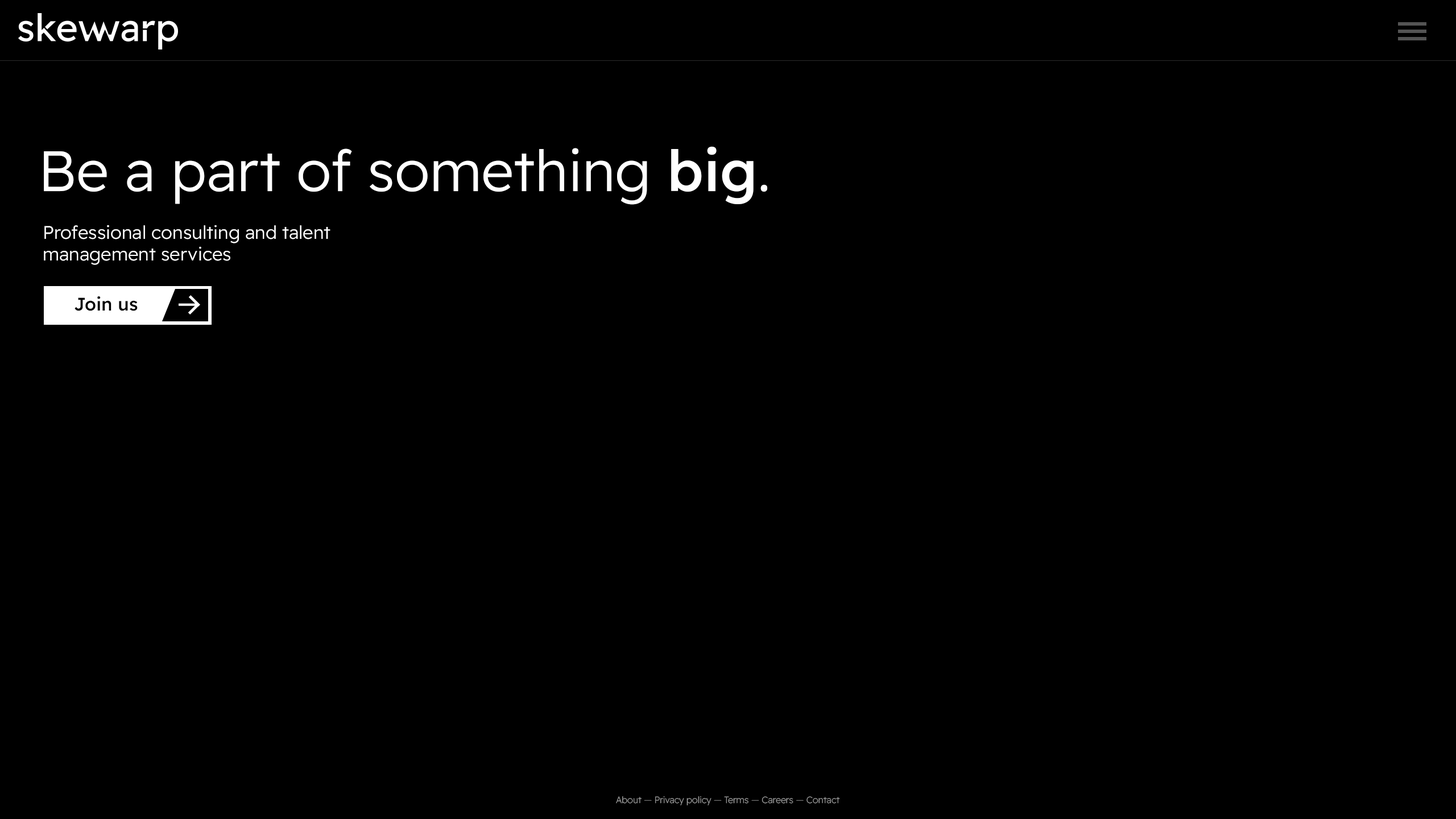
<style>
.page{position:relative;width:1456px;height:819px;background:#000000}
.page>*{position:absolute;margin:0}
.t1{font:56.9px "ReadexPro-Light";color:#ffffff}
.t2{font:56.9px "ReadexPro-Medium";color:#ffffff}
.t3{font:18.2px "ReadexPro-Light";color:#ffffff}
.t4{font:18.2px "ReadexPro-Medium";color:#000000}
.t5{font:9.1px "ReadexPro-ExtraLight";color:#9d9d9d}
.t6{font:9.1px "ReadexPro-ExtraLight";color:#717171}
.t7{font:9.1px "ReadexPro-ExtraLight";color:#727272}
</style>
<div class="page">
<p class="t1" style="left:44px;top:146px;width:724px;height:59px">Be a part of something <span class="t2">big</span>.</p>
<p class="t3" style="left:44px;top:225px;width:286px;height:40px">Professional consulting and talent<br>management services</p>
<p class="t4" style="left:75px;top:296px;width:63px;height:15px">Join us</p>
<p class="t5" style="left:616px;top:796px;width:224px;height:9px">About <span class="t6">— </span>Privacy policy <span class="t7">— </span>Terms <span class="t7">— </span>Careers <span class="t7">— </span>Contact</p>
</div>
